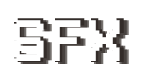
<style>
.page{position:relative;width:141px;height:75px;background:#ffffff}
.page>*{position:absolute;margin:0}
.t1{font:54.2px "PixelGameFont";letter-spacing:0.04em;color:#ffffff;text-transform:uppercase}
.t2{font:58.3px "PixelGameFont";text-transform:uppercase}
</style>
<div class="page">
<p class="t1" style="left:13px;top:20px;width:107px;height:41px">sfx</p>
<p class="t2" style="left:17px;top:20px;width:110px;height:44px">sfx</p>
<p class="t2" style="left:19px;top:20px;width:110px;height:44px">sfx</p>
</div>
